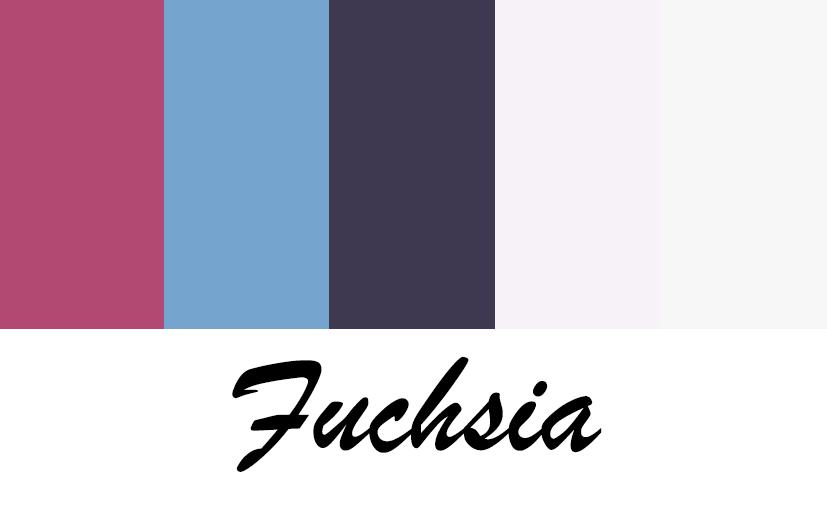
<style>
.page{position:relative;width:827px;height:512px;background:#ffffff}
.page>*{position:absolute;margin:0}
.t1{font:144px "BrushScriptMT";color:#000000}
</style>
<div class="page">
<p class="t1" style="left:232px;top:356px;width:370px;height:116px">Fuchsia</p>
</div>
